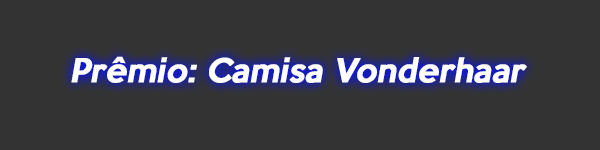
<style>
.page{position:relative;width:600px;height:150px;background:#333333}
.page>*{position:absolute;margin:0}
.t1{font:30px "KeepCalm-Medium";color:#ffffff;font-weight:bold;font-style:italic}
</style>
<div class="page">
<p class="t1" style="left:71px;top:56px;width:456px;height:27px">Prêmio: Camisa Vonderhaar</p>
</div>
